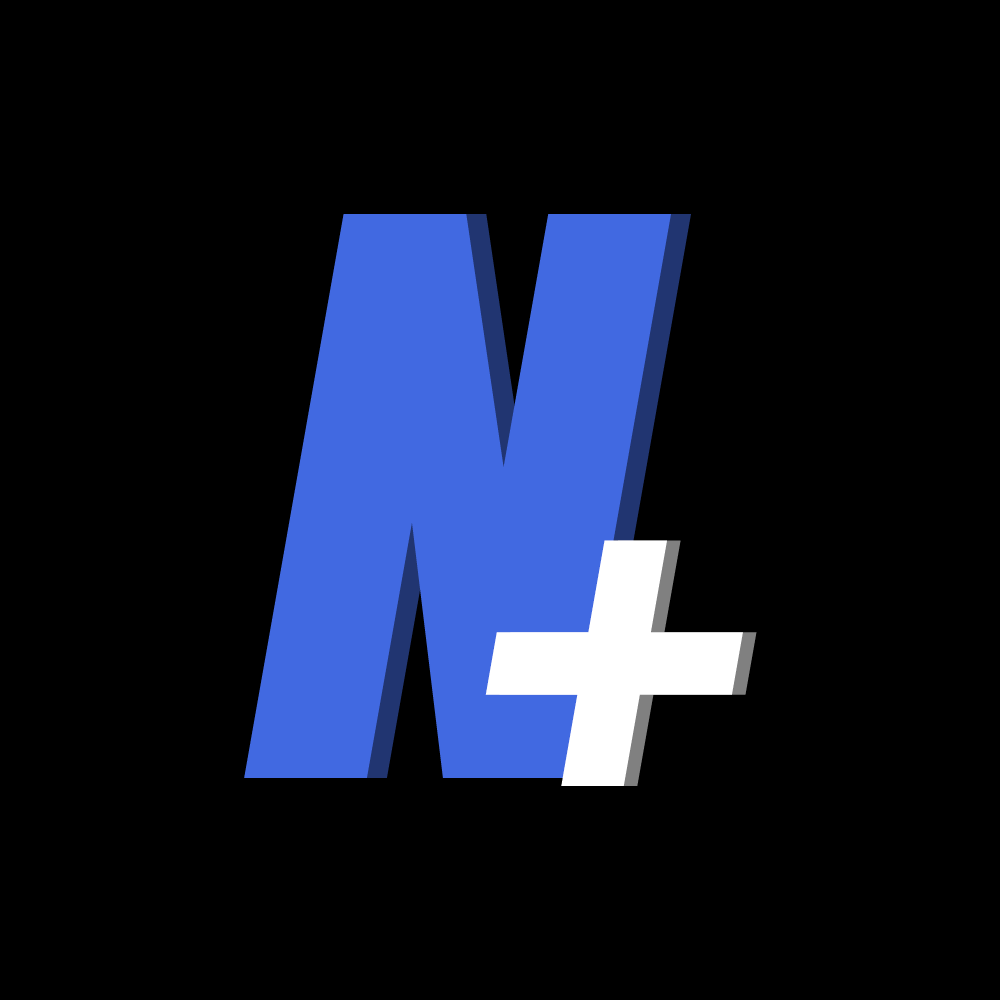
<style>
.page{position:relative;width:1000px;height:1000px;background:#000000}
.page>*{position:absolute;margin:0}
.t1{font:712.9px "Impact";color:#4169e1;font-style:italic}
.t2{font:522.3px "Impact";color:#ffffff;font-style:italic}
</style>
<div class="page">
<p class="t1" style="left:244px;top:214px;width:427px;height:564px">N</p>
<p class="t1" style="left:264px;top:214px;width:427px;height:564px;opacity:0.5">N</p>
<p class="t2" style="left:485px;top:540px;width:258px;height:246px">+</p>
<p class="t2" style="left:499px;top:540px;width:258px;height:246px;opacity:0.5">+</p>
</div>
